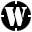
<style>
.page{position:relative;width:32px;height:32px;background:#ffffff}
.page>*{position:absolute;margin:0}
.t1{font:25px "StencilStd";color:#ffffff}
</style>
<div class="page">
<p class="t1" style="left:4px;top:7px;width:23px;height:19px">W</p>
</div>
